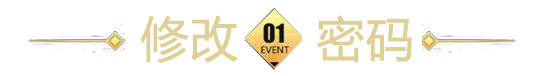
<style>
.page{position:relative;width:552px;height:76px;background:#ffffff}
.page>*{position:absolute;margin:0}
.t1{font:48px "MicrosoftYaHeiUI";color:#dfd096;font-weight:bold}
</style>
<div class="page">
<p class="t1" style="left:140px;top:15px;width:272px;height:48px">修改     密码</p>
</div>
